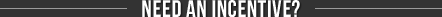
<style>
.page{position:relative;width:442px;height:17px;background:#333333}
.page>*{position:absolute;margin:0}
.t1{font:24px "BebasNeue";letter-spacing:0.025em;color:#ffffff}
</style>
<div class="page">
<p class="t1" style="left:142px;top:0px;width:158px;height:17px">Need An Incentive?</p>
</div>
